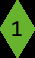
<style>
.page{position:relative;width:35px;height:58px;background:#000000}
.page>*{position:absolute;margin:0}
.t1{font:23px "Consolas";letter-spacing:0.029em;color:#000000}
</style>
<div class="page">
<p class="t1" style="left:12px;top:21px;width:10px;height:15px">1</p>
</div>
